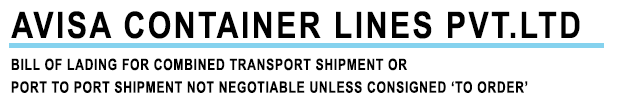
<style>
.page{position:relative;width:622px;height:103px;background:#ffffff}
.page>*{position:absolute;margin:0}
.t1{font:36.7px "Arial-BoldMT";letter-spacing:0.08em;color:#000000;scale:0.83 1}
.t2{font:15.7px/22.7px "Arial-BoldMT";letter-spacing:0.06em;color:#000000;scale:0.77 1}
</style>
<div class="page">
<p class="t1" style="left:11px;top:11px;width:569px;height:28px">AVISA CONTAINER LINES PVT.LTD</p>
<p class="t2" style="left:11px;top:58px;width:517px;height:35px;text-align:right">BILL OF LADING FOR COMBINED TRANSPORT SHIPMENT OR<br>PORT TO PORT SHIPMENT NOT NEGOTIABLE UNLESS CONSIGNED ‘TO ORDER’</p>
</div>
